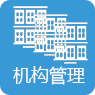
<style>
.page{position:relative;width:95px;height:95px;background:#3998d6}
.page>*{position:absolute;margin:0}
.t1{font:18px "MicrosoftYaHei";color:#ffffff}
</style>
<div class="page">
<p class="t1" style="left:13px;top:66px;width:72px;height:19px">机构管理</p>
</div>
